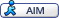
<style>
.page{position:relative;width:59px;height:18px;background:#ffffff}
.page>*{position:absolute;margin:0}
.t1{font:9.4px "Decker-Bold";letter-spacing:0.025em;color:#333f63;scale:1.11 1}
</style>
<div class="page">
<p class="t1" style="left:26px;top:7px;width:18px;height:7px">AIM</p>
</div>
